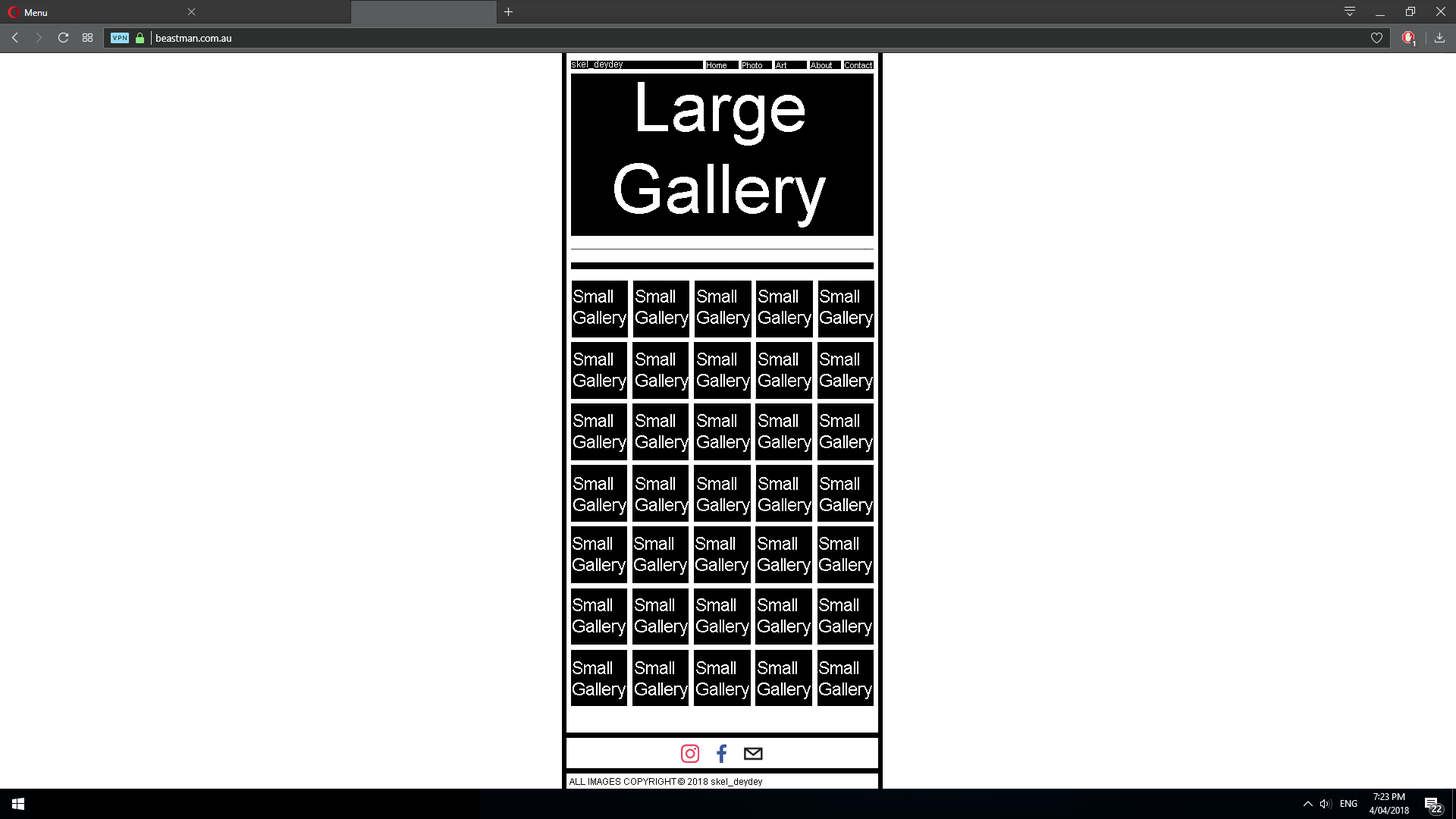
<style>
.page{position:relative;width:1456px;height:819px;background:#ffffff}
.page>*{position:absolute;margin:0}
.t1{font:9.1px "ArialMT";color:#ffffff}
.t2{font:8.3px "ArialMT";color:#ffffff}
.t3{font:68.2px "ArialMT";color:#ffffff}
.t4{font:17.4px "ArialMT";color:#ffffff}
.t5{font:9.1px "ArialMT";color:#000000}
</style>
<div class="page">
<p class="t1" style="left:572px;top:61px;width:51px;height:8px">skel_deydey</p>
<p class="t2" style="left:707px;top:62px;width:19px;height:6px">Home</p>
<p class="t2" style="left:742px;top:62px;width:20px;height:6px">Photo</p>
<p class="t2" style="left:776px;top:62px;width:10px;height:6px">Art</p>
<p class="t2" style="left:811px;top:62px;width:21px;height:6px">About</p>
<p class="t2" style="left:845px;top:62px;width:27px;height:6px">Contact</p>
<p class="t3" style="left:614px;top:82px;width:212px;height:145px;text-align:center">Large<br>Gallery</p>
<p class="t4" style="left:573px;top:290px;width:53px;height:38px">Small<br>Gallery</p>
<p class="t4" style="left:635px;top:290px;width:54px;height:38px">Small<br>Gallery</p>
<p class="t4" style="left:697px;top:290px;width:53px;height:38px">Small<br>Gallery</p>
<p class="t4" style="left:758px;top:290px;width:53px;height:38px">Small<br>Gallery</p>
<p class="t4" style="left:820px;top:290px;width:53px;height:38px">Small<br>Gallery</p>
<p class="t4" style="left:573px;top:353px;width:53px;height:38px">Small<br>Gallery</p>
<p class="t4" style="left:635px;top:353px;width:54px;height:38px">Small<br>Gallery</p>
<p class="t4" style="left:697px;top:353px;width:53px;height:38px">Small<br>Gallery</p>
<p class="t4" style="left:758px;top:353px;width:53px;height:38px">Small<br>Gallery</p>
<p class="t4" style="left:820px;top:353px;width:53px;height:38px">Small<br>Gallery</p>
<p class="t4" style="left:573px;top:414px;width:53px;height:38px">Small<br>Gallery</p>
<p class="t4" style="left:635px;top:414px;width:54px;height:38px">Small<br>Gallery</p>
<p class="t4" style="left:697px;top:414px;width:53px;height:38px">Small<br>Gallery</p>
<p class="t4" style="left:758px;top:414px;width:53px;height:38px">Small<br>Gallery</p>
<p class="t4" style="left:820px;top:414px;width:53px;height:38px">Small<br>Gallery</p>
<p class="t4" style="left:573px;top:477px;width:53px;height:38px">Small<br>Gallery</p>
<p class="t4" style="left:635px;top:477px;width:54px;height:38px">Small<br>Gallery</p>
<p class="t4" style="left:697px;top:477px;width:53px;height:38px">Small<br>Gallery</p>
<p class="t4" style="left:758px;top:477px;width:53px;height:38px">Small<br>Gallery</p>
<p class="t4" style="left:820px;top:477px;width:53px;height:38px">Small<br>Gallery</p>
<p class="t4" style="left:573px;top:537px;width:53px;height:38px">Small<br>Gallery</p>
<p class="t4" style="left:634px;top:537px;width:53px;height:38px">Small<br>Gallery</p>
<p class="t4" style="left:695px;top:537px;width:53px;height:38px">Small<br>Gallery</p>
<p class="t4" style="left:758px;top:537px;width:53px;height:38px">Small<br>Gallery</p>
<p class="t4" style="left:819px;top:537px;width:53px;height:38px">Small<br>Gallery</p>
<p class="t4" style="left:573px;top:598px;width:53px;height:38px">Small<br>Gallery</p>
<p class="t4" style="left:635px;top:598px;width:53px;height:38px">Small<br>Gallery</p>
<p class="t4" style="left:696px;top:598px;width:53px;height:38px">Small<br>Gallery</p>
<p class="t4" style="left:758px;top:598px;width:53px;height:38px">Small<br>Gallery</p>
<p class="t4" style="left:819px;top:598px;width:53px;height:38px">Small<br>Gallery</p>
<p class="t4" style="left:573px;top:661px;width:53px;height:38px">Small<br>Gallery</p>
<p class="t4" style="left:635px;top:661px;width:53px;height:38px">Small<br>Gallery</p>
<p class="t4" style="left:696px;top:661px;width:53px;height:38px">Small<br>Gallery</p>
<p class="t4" style="left:758px;top:661px;width:53px;height:38px">Small<br>Gallery</p>
<p class="t4" style="left:819px;top:661px;width:53px;height:38px">Small<br>Gallery</p>
<p class="t5" style="left:570px;top:778px;width:192px;height:8px">ALL IMAGES COPYRIGHT © 2018 skel_deydey</p>
</div>
